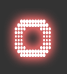
<style>
.page{position:relative;width:67px;height:74px;background:#333333}
.page>*{position:absolute;margin:0}
.t1{font:60px "The-2K12";color:#ffffff;scale:0.75 1}
</style>
<div class="page">
<p class="t1" style="left:14px;top:19px;width:37px;height:38px">0</p>
</div>
